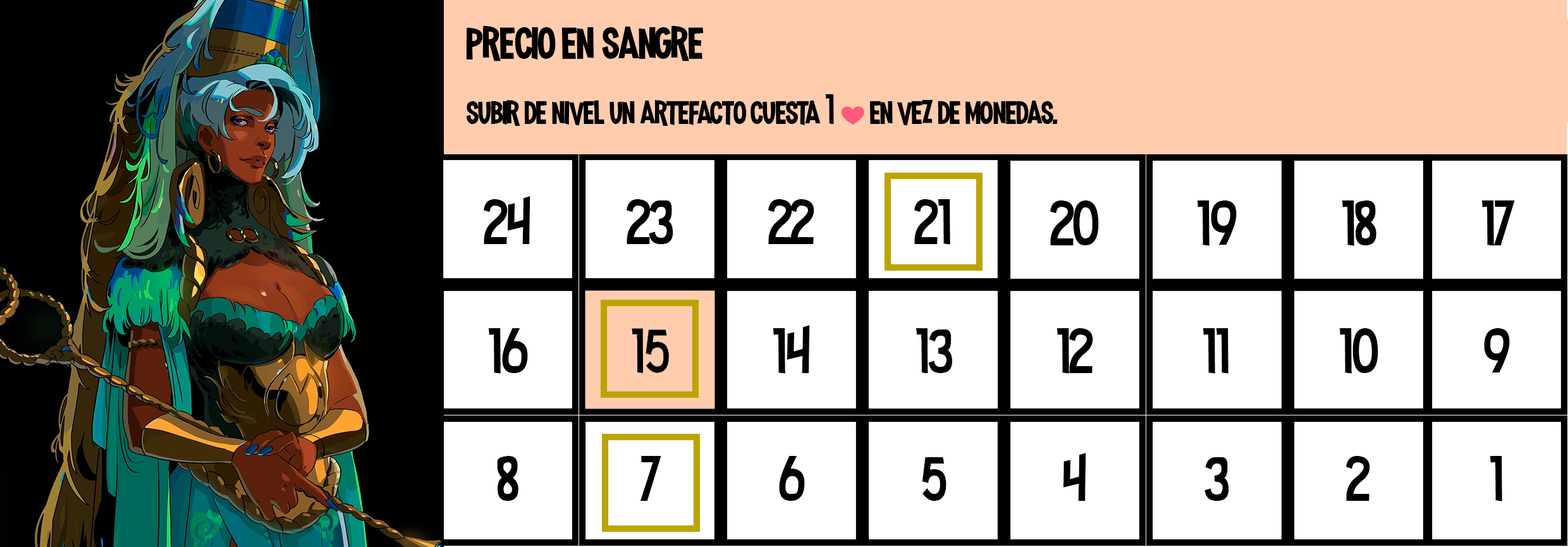
<style>
.page{position:relative;width:1568px;height:547px;background:#ffffff}
.page>*{position:absolute;margin:0}
.t1{font:58.3px "MadnessHyperactive";color:#000000}
.t2{font:42.2px "MadnessHyperactive";color:#000000}
.t3{font:24.3px "EmojiOneColor";color:#ffffff}
</style>
<div class="page">
<p class="t1" style="left:466px;top:26px;width:238px;height:35px">precio en sangre</p>
<p class="t2" style="left:466px;top:94px;width:592px;height:32px">subir de nivel un artefacto cuesta 1 <span class="t3">❤️ </span>en vez de monedas.</p>
</div>
